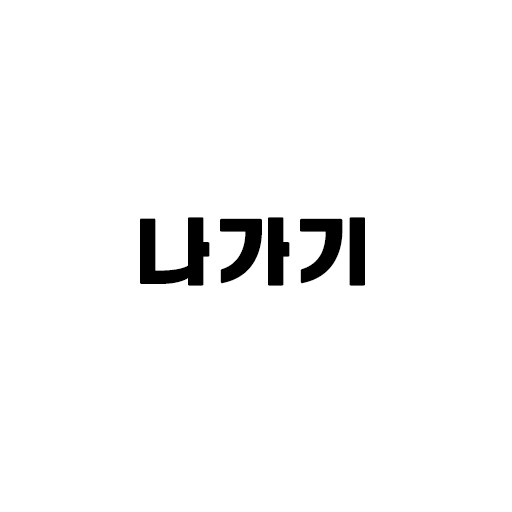
<style>
.page{position:relative;width:512px;height:512px;background:#ffffff}
.page>*{position:absolute;margin:0}
.t1{font:84px "Tenada";letter-spacing:0.07em;color:#000000}
</style>
<div class="page">
<p class="t1" style="left:140px;top:217px;width:225px;height:69px">나가기</p>
</div>
